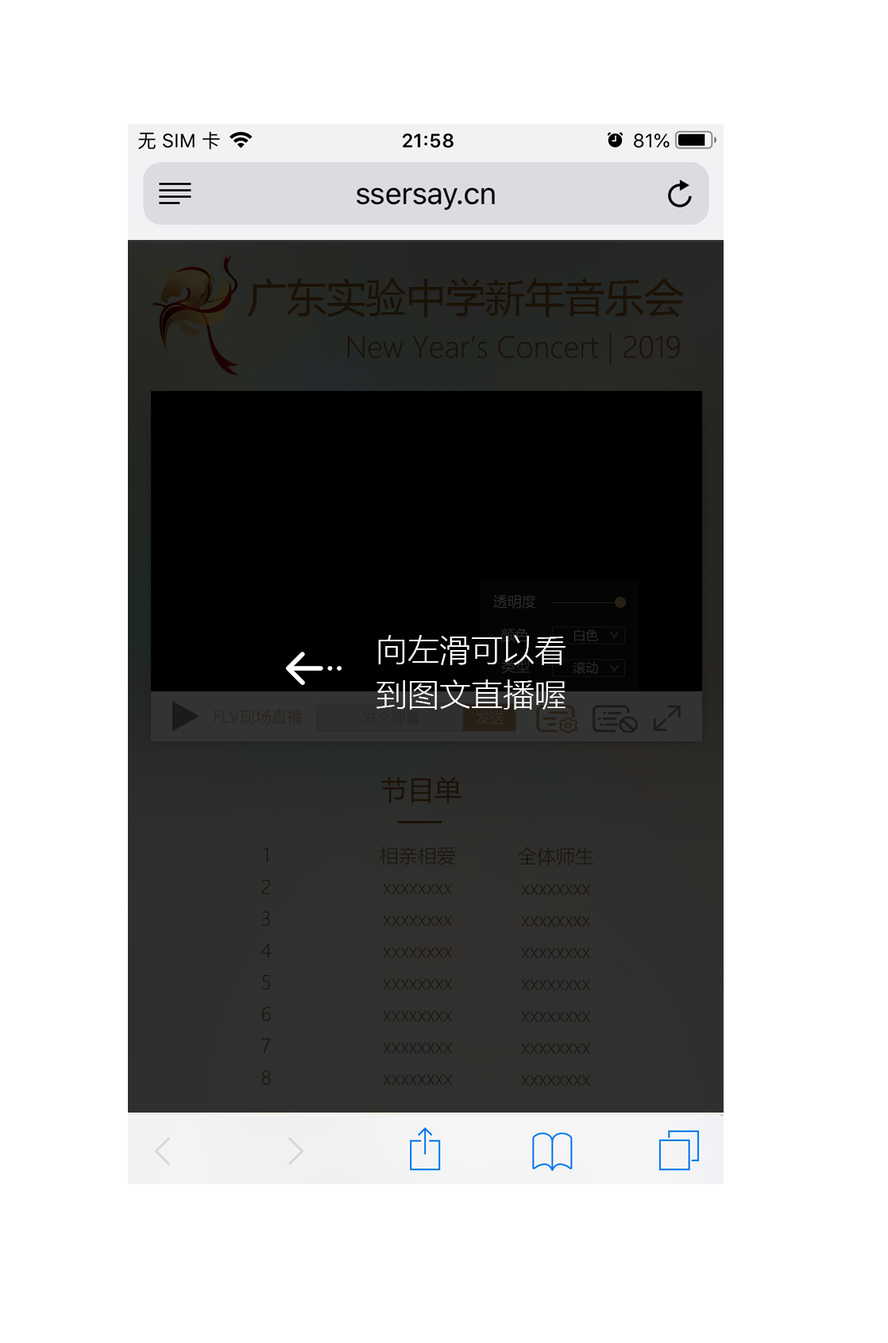
<style>
.page{position:relative;width:888px;height:1343px;background:#ffffff}
.page>*{position:absolute;margin:0}
.t1{font:39.7px "MicrosoftYaHei";color:#1b1105}
.t2{font:28.6px "MicrosoftYaHeiUILight";color:#1b1105}
.t3{font:14.3px "MicrosoftYaHeiLight";color:#333333}
.t4{font:12.7px "MicrosoftYaHeiLight";color:#333333}
.t5{font:31.8px/47.7px "MicrosoftYaHeiLight";color:#fdfdfd}
.t6{font:12.7px "MicrosoftYaHeiLight"}
.t7{font:15.9px "MicrosoftYaHeiLight";color:#282015}
.t8{font:14.3px "MicrosoftYaHeiLight";color:#222222}
.t9{font:27px "MicrosoftYaHei";color:#1b1105}
.t10{font:19.1px/35px "MicrosoftYaHeiLight";color:#1b1105}
.t11{font:15.9px/35px "MicrosoftYaHeiLight";color:#1b1105}
</style>
<div class="page">
<p class="t1" style="left:247px;top:278px;width:437px;height:39px">广东实验中学新年音乐会</p>
<p class="t2" style="left:348px;top:334px;width:332px;height:31px">New Year’s Concert | 2019</p>
<p class="t3" style="left:493px;top:594px;width:43px;height:15px">透明度</p>
<p class="t4" style="left:574px;top:628px;width:24px;height:13px">白色</p>
<p class="t5" style="left:377px;top:635px;width:189px;height:74px">向左滑可以看<br>到图文直播喔</p>
<p class="t6" style="left:573px;top:661px;width:25px;height:13px">滚动</p>
<p class="t7" style="left:214px;top:709px;width:89px;height:16px">FLV现场直播</p>
<p class="t8" style="left:363px;top:710px;width:56px;height:15px">发个弹幕</p>
<p class="t3" style="left:476px;top:710px;width:28px;height:15px">发送</p>
<p class="t9" style="left:381px;top:776px;width:81px;height:27px">节目单</p>
<p class="t10" style="left:261px;top:847px;width:11px;height:237px;text-align:center">1<br>2<br>3<br>4<br>5<br>6<br>7<br>8</p>
<p class="t10" style="left:380px;top:846px;width:75px;height:239px;text-align:center">相亲相爱<br>xxxxxxxx<br>xxxxxxxx<br>xxxxxxxx<br>xxxxxxxx<br>xxxxxxxx<br>xxxxxxxx<br>xxxxxxxx</p>
<p class="t10" style="left:518px;top:847px;width:75px;height:238px;text-align:center"><span class="t11"><br></span><br>全体师生<br>xxxxxxxx<br>xxxxxxxx<br>xxxxxxxx<br>xxxxxxxx<br>xxxxxxxx<br>xxxxxxxx<br>xxxxxxxx</p>
</div>
